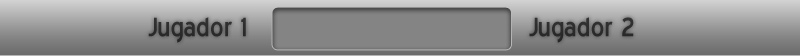
<style>
.page{position:relative;width:800px;height:56px}
.page>*{position:absolute;margin:0}
.t1{font:33.6px "BlueHighway";color:#2c2c2c}
</style>
<div class="page">
<p class="t1" style="left:148px;top:17px;width:98px;height:26px">Jugador 1</p>
<p class="t1" style="left:529px;top:17px;width:105px;height:26px">Jugador 2</p>
</div>
